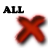
<style>
.page{position:relative;width:48px;height:48px;background:#ffffff}
.page>*{position:absolute;margin:0}
.t1{font:10px "CooperBlack";color:#000000}
</style>
<div class="page">
<p class="t1" style="left:3px;top:6px;width:21px;height:8px">ALL</p>
</div>
